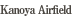
<style>
.page{position:relative;width:72px;height:18px;background:#ffffff}
.page>*{position:absolute;margin:0}
.t1{font:12px "RyuminPro-ExBold";letter-spacing:-0.08em;color:#4c4843;scale:0.9 1}
</style>
<div class="page">
<p class="t1" style="left:0px;top:5px;width:72px;height:11px">Kanoya Airfield</p>
</div>
